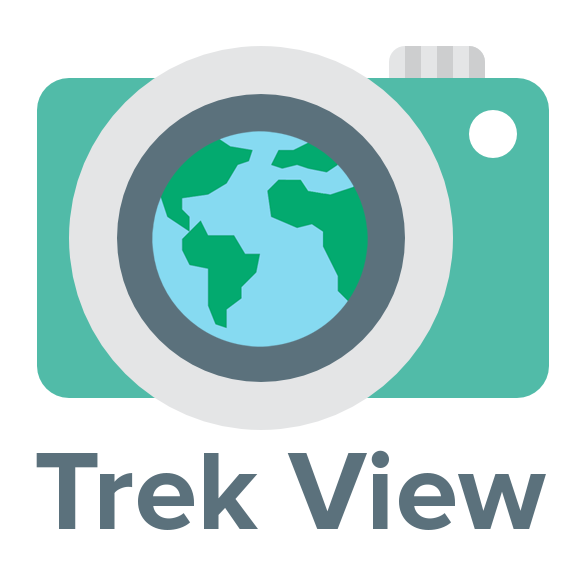
<style>
.page{position:relative;width:583px;height:583px;background:#ffffff}
.page>*{position:absolute;margin:0}
.t1{font:114.3px "ProximaNova-Bold";color:#5b717c}
</style>
<div class="page">
<p class="t1" style="left:36px;top:450px;width:510px;height:80px">Trek View</p>
</div>
